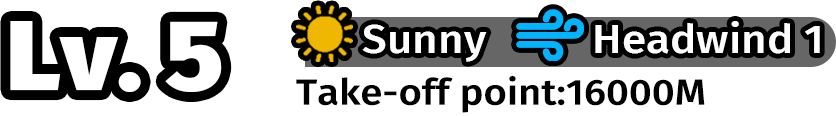
<style>
.page{position:relative;width:836px;height:116px;background:#ffffff}
.page>*{position:absolute;margin:0}
.t1{font:99px "FiraSans-Black";color:#ffffff;scale:1.07 1}
.t2{font:39.6px "FiraSans-Medium";color:#ffffff;scale:1.11 1}
.t3{font:36px "FiraSans-Medium";color:#000000;scale:1.11 1}
</style>
<div class="page">
<p class="t1" style="left:10px;top:21px;width:212px;height:71px">Lv. 5</p>
<p class="t2" style="left:362px;top:24px;width:125px;height:38px">Sunny</p>
<p class="t2" style="left:595px;top:21px;width:225px;height:33px">Headwind 1</p>
<p class="t3" style="left:296px;top:75px;width:409px;height:38px">Take-off point:16000M</p>
</div>
